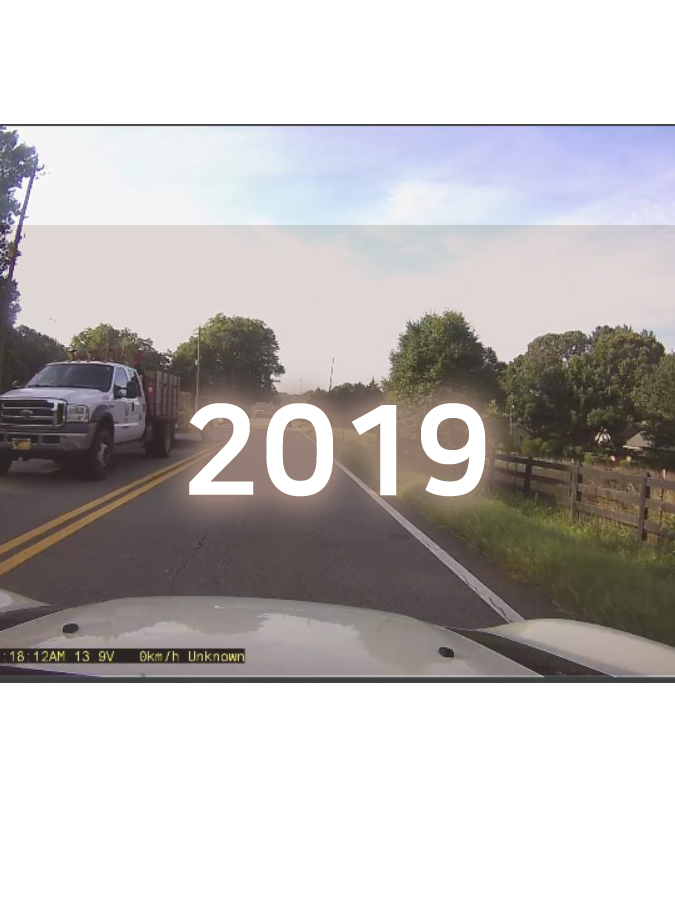
<style>
.page{position:relative;width:675px;height:900px;background:#ffffff}
.page>*{position:absolute;margin:0}
.t1{font:125px "NanumSquareEB";color:#ffffff}
</style>
<div class="page">
<p class="t1" style="left:189px;top:403px;width:297px;height:94px">2019</p>
</div>
